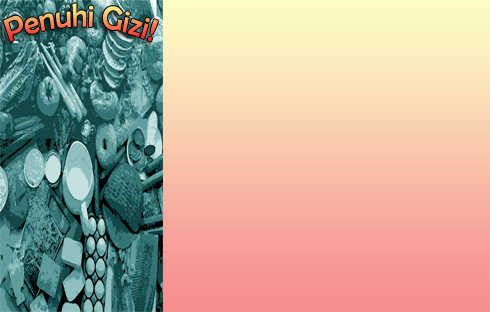
<style>
.page{position:relative;width:490px;height:312px}
.page>*{position:absolute;margin:0}
.t1{font:32.9px "BerlinSansFB-Reg";scale:0.86 1}
</style>
<div class="page">
<p class="t1" style="left:3px;top:3px;width:155px;height:39px">Penuhi Gizi!</p>
</div>
